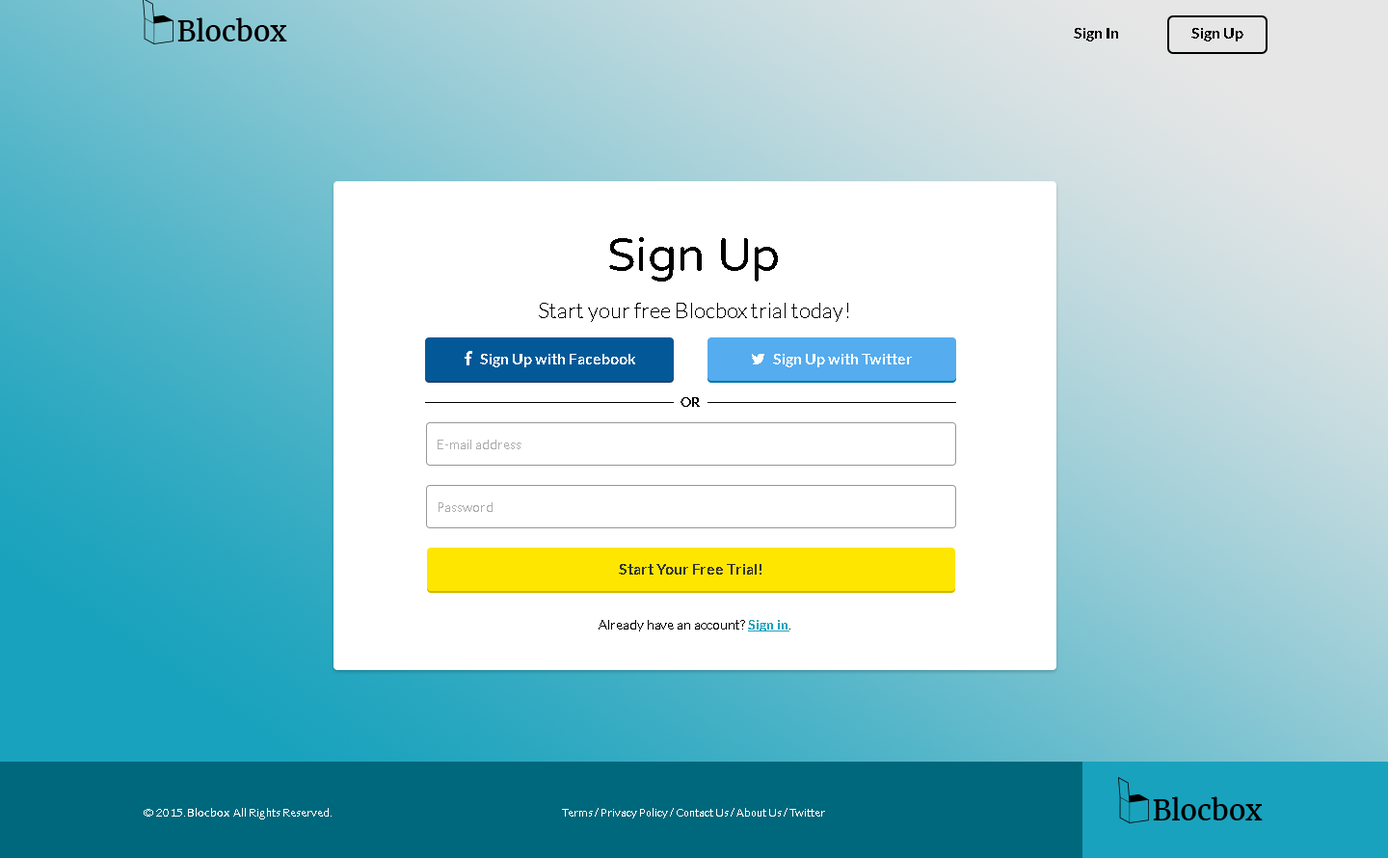
<style>
.page{position:relative;width:1388px;height:859px;background:#ffffff}
.page>*{position:absolute;margin:0}
.t1{font:15.4px "Lato-Bold";color:#000000}
.t2{font:46.3px "VarelaRound-Regular";color:#000000}
.t3{font:21.2px "Lato-Light";color:#000000}
.t4{font:13.5px "Lato-Bold";color:#000000}
.t5{font:13.5px "Lato-Light";color:#adadad}
.t6{font:15.4px "Lato-Bold";color:#333333}
.t7{font:13.5px "Lato-Light";color:#000000}
.t8{font:13.5px "Lato-Bold";color:#19a2bd;text-decoration:underline}
.t9{font:11.6px "Lato-Light";color:#ffffff}
.t10{font:11.6px "Lato-Bold";color:#ffffff}
</style>
<div class="page">
<p class="t1" style="left:1074px;top:28px;width:44px;height:13px">Sign In</p>
<p class="t1" style="left:1192px;top:28px;width:52px;height:13px">Sign Up</p>
<p class="t2" style="left:609px;top:237px;width:169px;height:45px">Sign Up</p>
<p class="t3" style="left:539px;top:303px;width:309px;height:19px">Start your free Blocbox trial today!</p>
<p class="t4" style="left:681px;top:397px;width:19px;height:10px">OR</p>
<p class="t5" style="left:438px;top:440px;width:84px;height:9px">E-mail address</p>
<p class="t5" style="left:439px;top:502px;width:54px;height:10px">Password</p>
<p class="t6" style="left:619px;top:564px;width:143px;height:11px">Start Your Free Trial!</p>
<p class="t7" style="left:599px;top:620px;width:192px;height:11px">Already have an account? <span class="t8">Sign in</span>.</p>
<p class="t9" style="left:144px;top:808px;width:188px;height:11px">© 2015. <span class="t10">Blocbox </span>­ All Rights Reserved.</p>
<p class="t9" style="left:562px;top:808px;width:263px;height:10px">Terms / Privacy Policy / Contact Us / About Us / Twitter</p>
</div>
